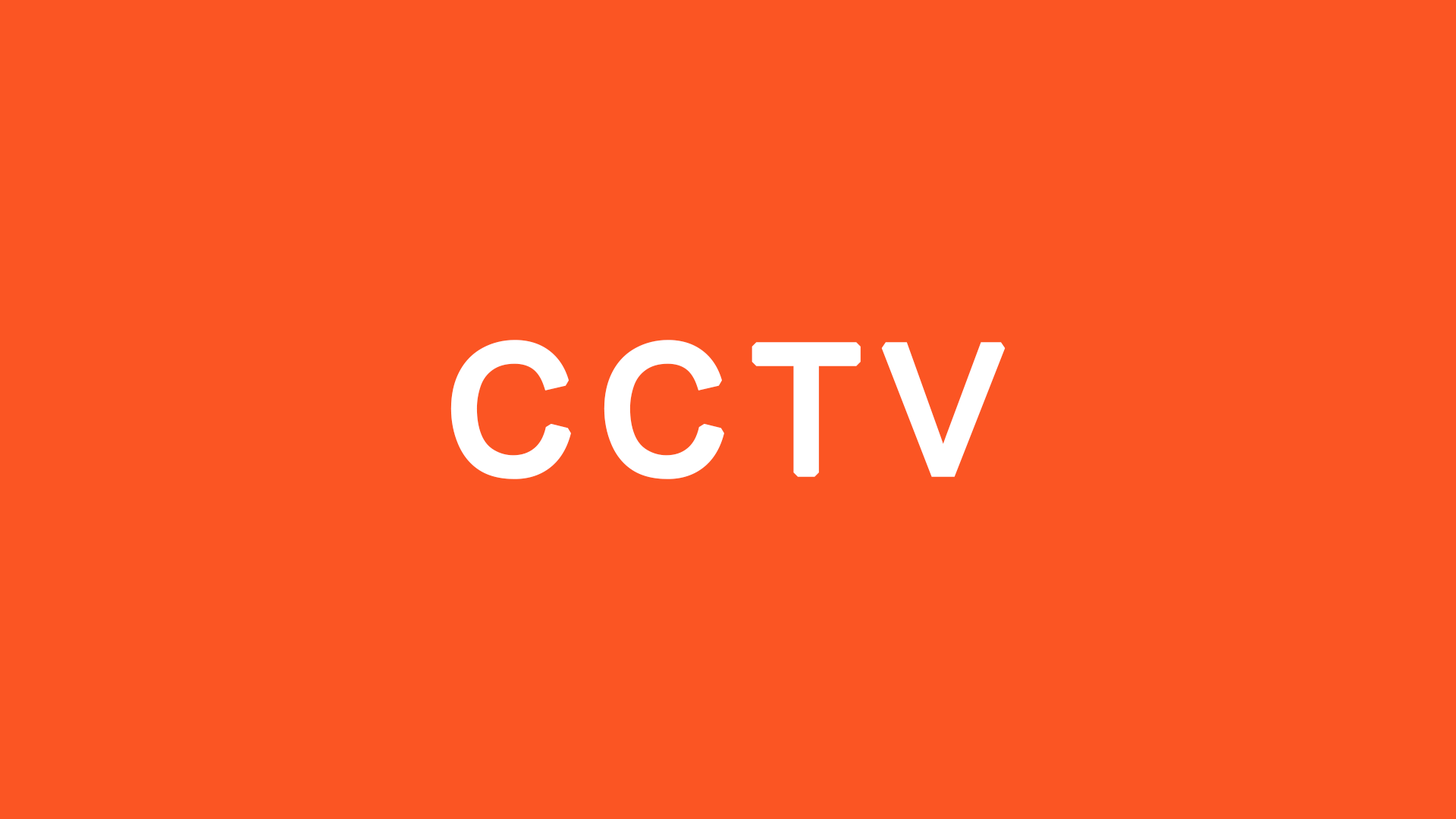
<style>
.page{position:relative;width:1456px;height:819px;background:#fb5523}
.page>*{position:absolute;margin:0}
.t1{font:175.6px "ArialMT";letter-spacing:0.12em;color:#ffffff;font-weight:bold}
</style>
<div class="page">
<p class="t1" style="left:450px;top:340px;width:556px;height:139px">CCTV</p>
</div>
